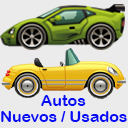
<style>
.page{position:relative;width:128px;height:128px;background:#ebebeb}
.page>*{position:absolute;margin:0}
.t1{font:16px "ArialRoundedMTBold";color:#070cf5}
.t2{font:15.8px "ArialRoundedMTBold";color:#070cf5}
</style>
<div class="page">
<p class="t1" style="left:41px;top:95px;width:45px;height:11px">Autos</p>
<p class="t2" style="left:1px;top:111px;width:126px;height:11px">Nuevos / Usados</p>
</div>
